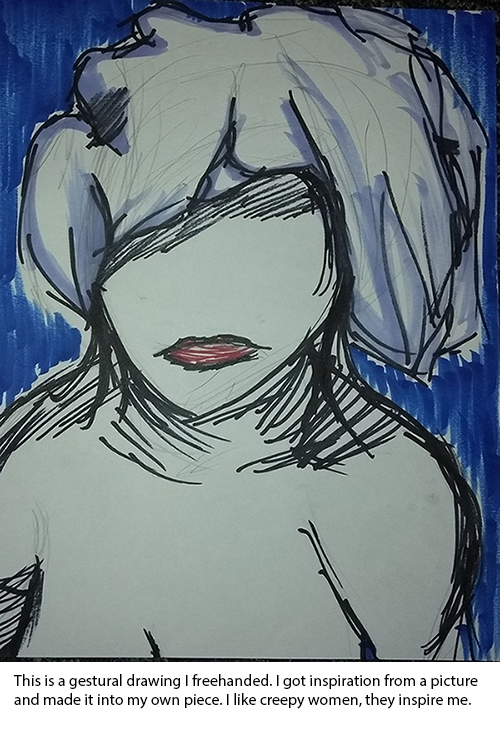
<style>
.page{position:relative;width:500px;height:738px}
.page>*{position:absolute;margin:0}
.t1{font:16px "MyriadPro-Regular";color:#000000}
</style>
<div class="page">
<p class="t1" style="left:13px;top:674px;width:465px;height:35px">This is a gestural drawing I freehanded. I got inspiration from a picture and made it into my own piece. I like creepy women, they inspire me.</p>
</div>
